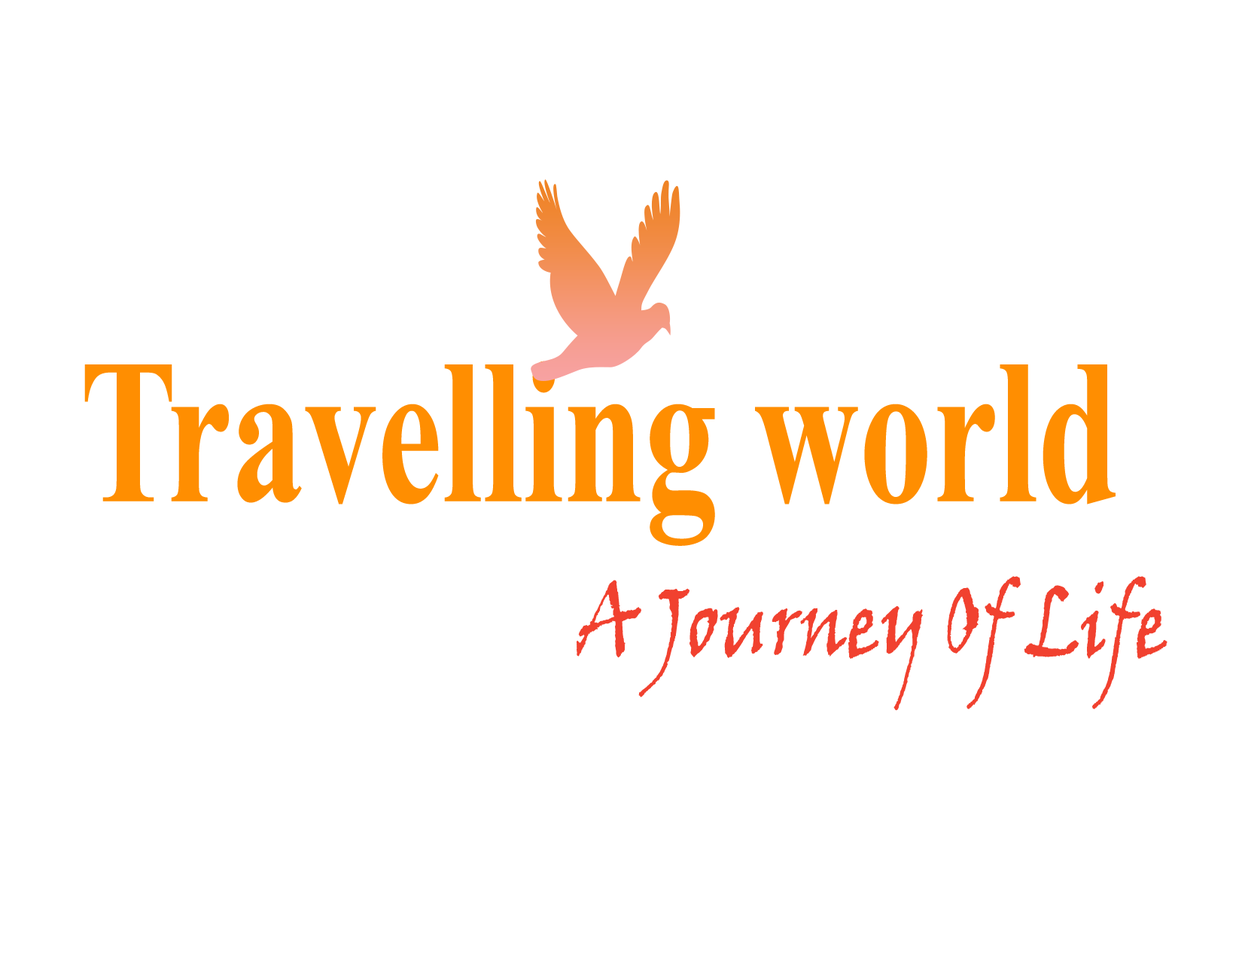
<style>
.page{position:relative;width:1242px;height:960px;background:#ffffff}
.page>*{position:absolute;margin:0}
.t1{font:206.3px "TimesNewRomanPS-BoldMT";color:#ff8e01;scale:0.71 1}
.t2{font:97.3px "VinerHandITC";color:#f1412f;scale:0.76 1}
</style>
<div class="page">
<p class="t1" style="left:84px;top:361px;width:1032px;height:185px">Travelling world</p>
<p class="t2" style="left:577px;top:576px;width:591px;height:135px">A Journey Of Life</p>
</div>
